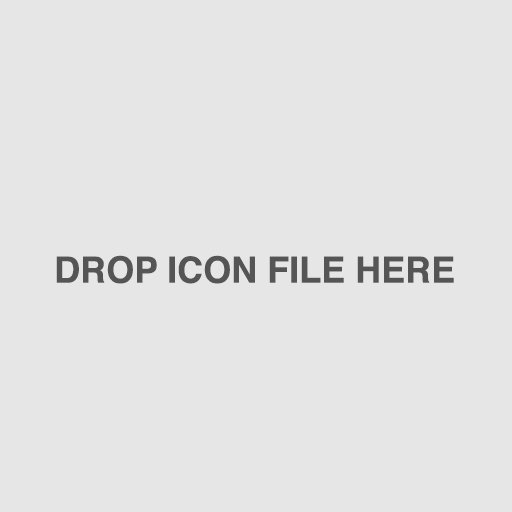
<style>
.page{position:relative;width:512px;height:512px;background:#e6e6e6}
.page>*{position:absolute;margin:0}
.t1{font:36px "Helvetica-Bold";color:#555555}
</style>
<div class="page">
<p class="t1" style="left:56px;top:255px;width:398px;height:29px">DROP ICON FILE HERE</p>
</div>
